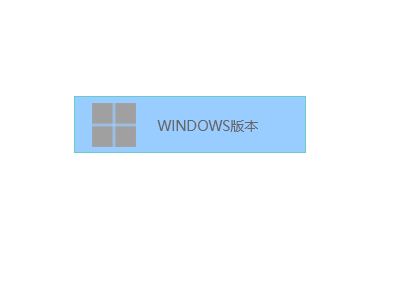
<style>
.page{position:relative;width:400px;height:300px;background:#ffffff}
.page>*{position:absolute;margin:0}
.t1{font:14px "MicrosoftYaHei";color:#666666}
</style>
<div class="page">
<p class="t1" style="left:157px;top:120px;width:101px;height:12px">WINDOWS版本</p>
</div>
